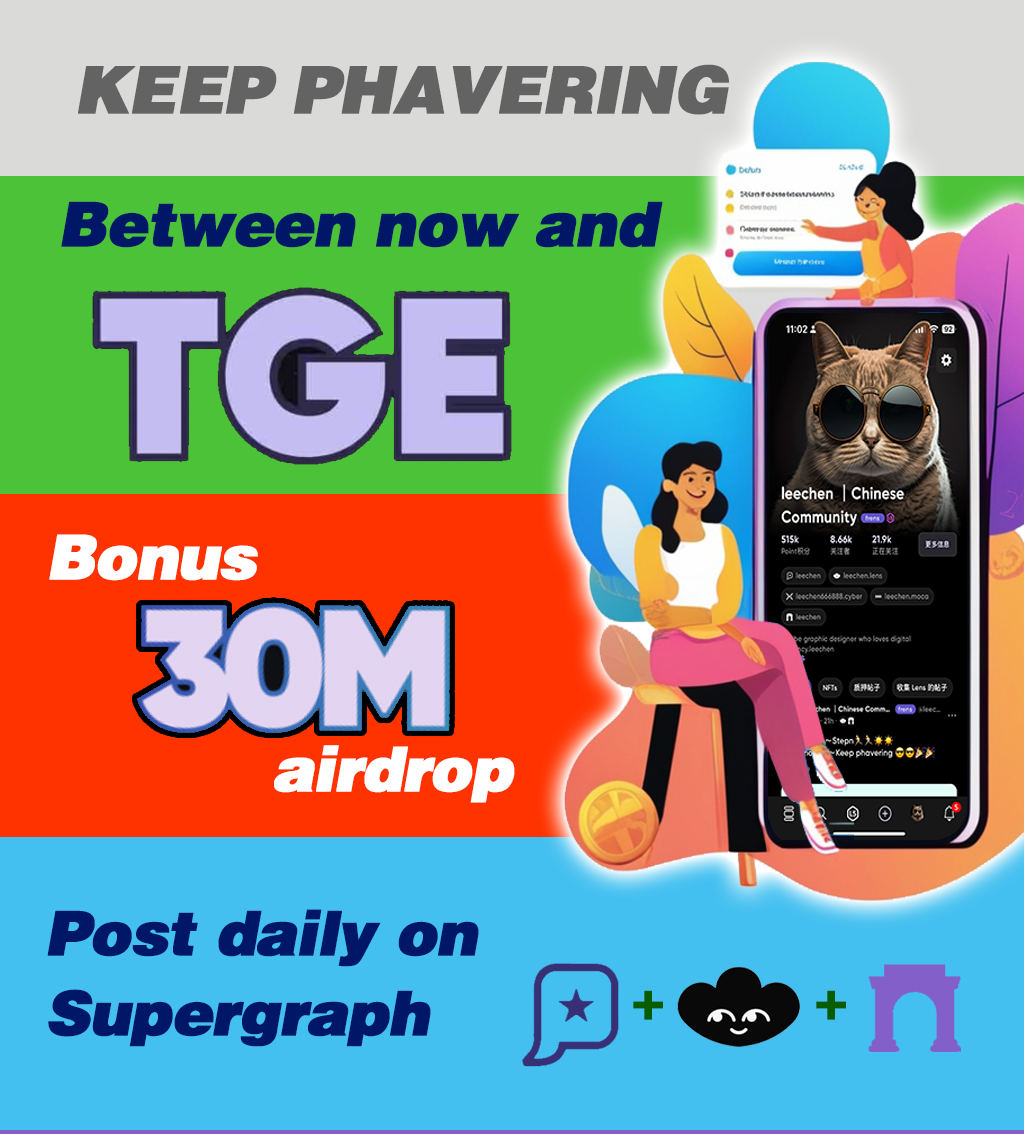
<style>
.page{position:relative;width:1024px;height:1134px;background:#44c0f0}
.page>*{position:absolute;margin:0}
.t1{font:65.6px "FZCCHJW--GB1-0";letter-spacing:-0.03em;color:#636363;font-weight:bold;font-style:italic}
.t2{font:61.6px "FZCCHJW--GB1-0";letter-spacing:-0.03em;color:#001768;font-weight:bold;font-style:italic}
.t3{font:62px/70.8px "FZCCHJW--GB1-0";letter-spacing:-0.03em;color:#ffffff;font-weight:bold;font-style:italic}
.t4{font:61.6px/79.4px "FZCCHJW--GB1-0";letter-spacing:-0.03em;color:#001768;font-weight:bold;font-style:italic}
</style>
<div class="page">
<p class="t1" style="left:78px;top:64px;width:651px;height:51px">KEEP PHAVERING</p>
<p class="t2" style="left:61px;top:201px;width:602px;height:47px">Between now and</p>
<p class="t3" style="left:49px;top:534px;width:466px;height:269px">Bonus <br><br><br>           airdrop</p>
<p class="t4" style="left:47px;top:909px;width:432px;height:138px">Post daily on <br>Supergraph</p>
</div>
